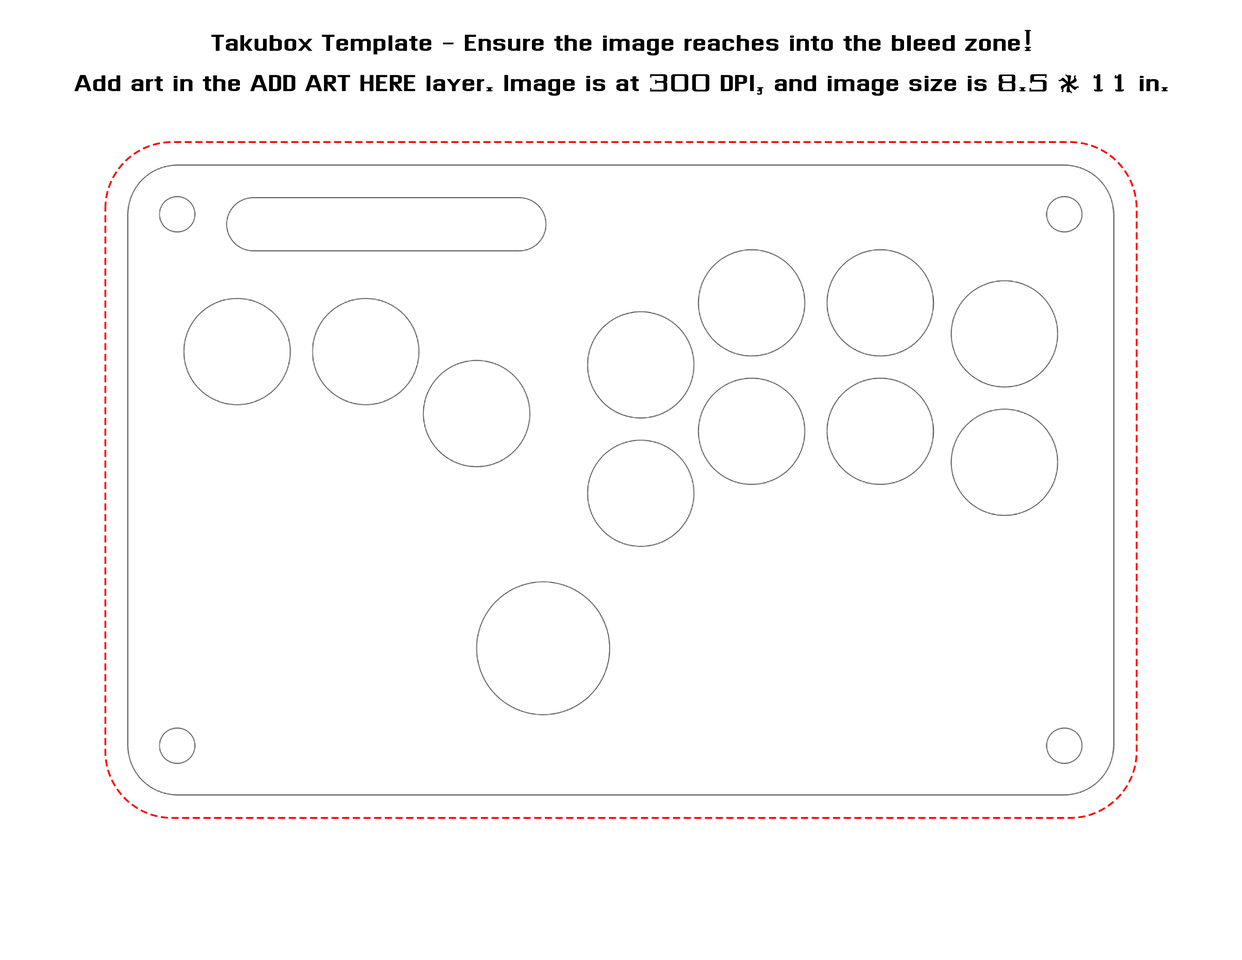
<style>
.page{position:relative;width:1242px;height:960px;background:#ffffff}
.page>*{position:absolute;margin:0}
.t1{font:33.5px "Dhurjati";color:#000000}
</style>
<div class="page">
<p class="t1" style="left:74px;top:30px;width:1094px;height:66px;text-align:center">Takubox Template - Ensure the image reaches into the bleed zone! <br>Add art in the ADD ART HERE layer. Image is at 300 DPI, and image size is 8.5 * 11 in.</p>
</div>
